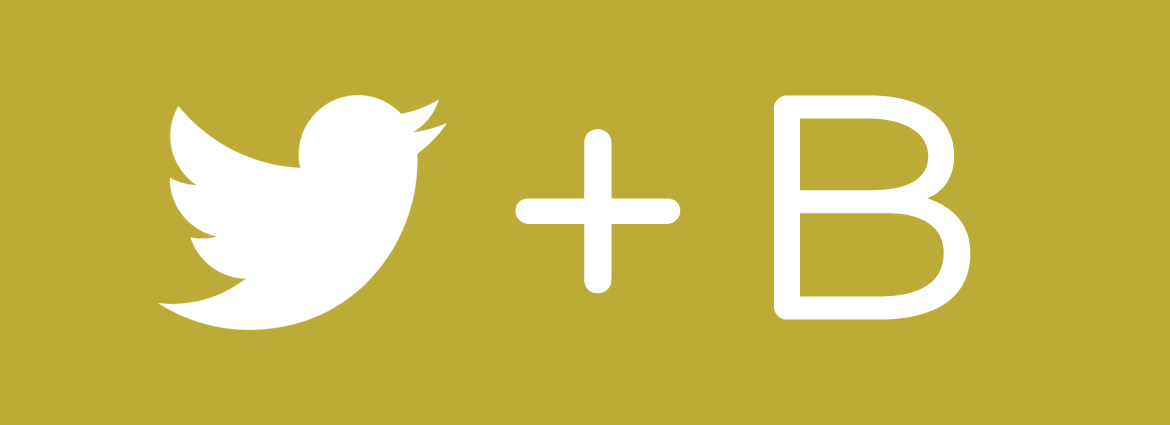
<style>
.page{position:relative;width:1170px;height:425px;background:#bcab37}
.page>*{position:absolute;margin:0}
.t1{font:352px "Hero";letter-spacing:0.2em;color:#ffffff}
.t2{font:372px "Hero";letter-spacing:0.2em;color:#ffffff}
</style>
<div class="page">
<p class="t1" style="left:774px;top:95px;width:197px;height:225px">B</p>
<p class="t2" style="left:515px;top:129px;width:166px;height:165px">+</p>
</div>
